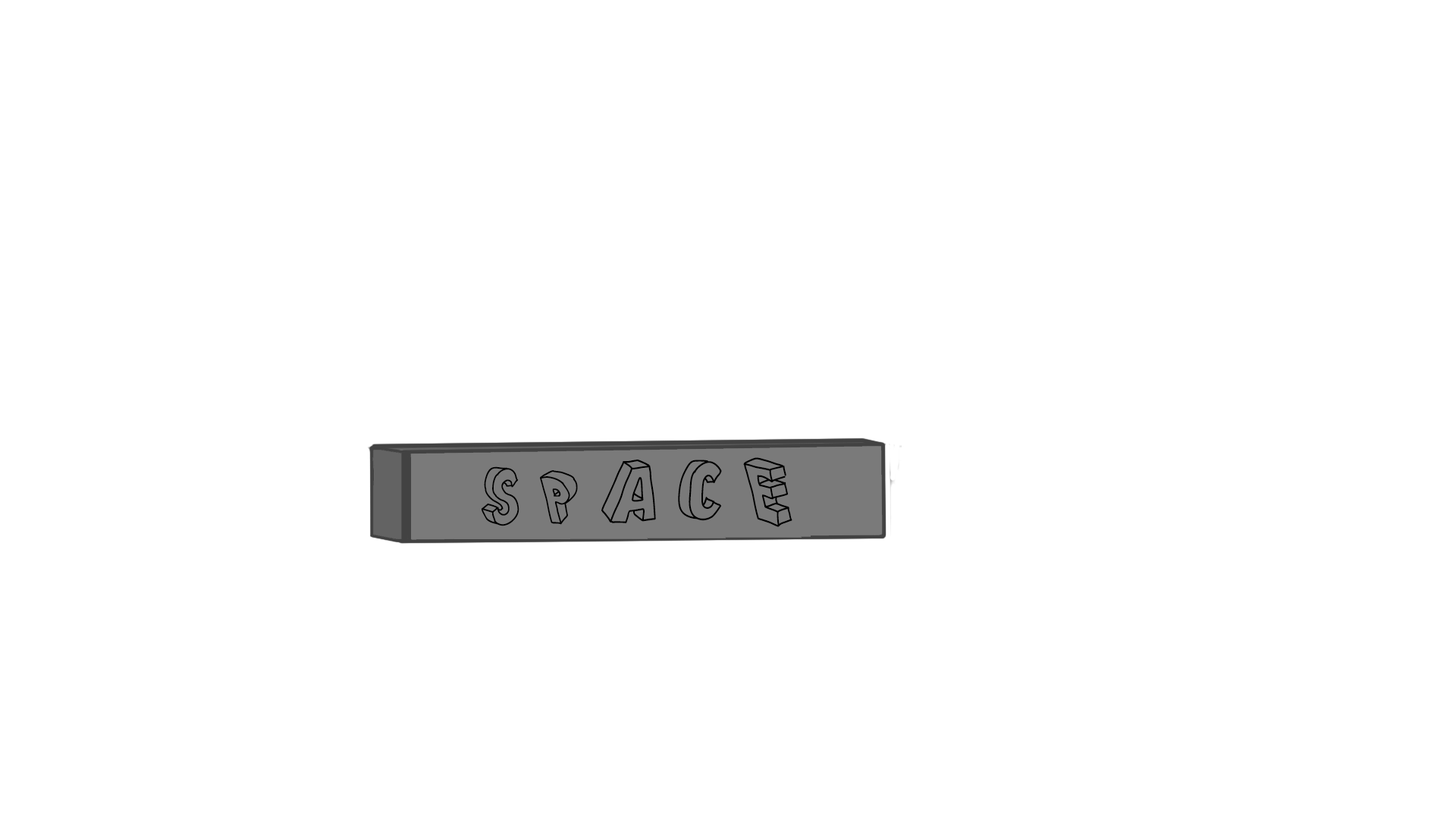
<style>
.page{position:relative;width:1456px;height:819px;background:#ffffff}
.page>*{position:absolute;margin:0}
.t1{font:86.6px "CartoonBlocks";color:#000000;scale:0.92 1}
</style>
<div class="page">
<p class="t1" style="left:481px;top:457px;width:311px;height:70px;rotate:-1deg">S P A C E</p>
</div>
